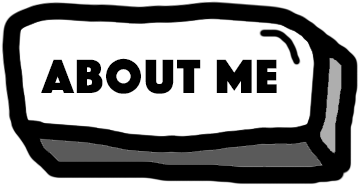
<style>
.page{position:relative;width:360px;height:186px;background:#ffffff}
.page>*{position:absolute;margin:0}
.t1{font:50px "Phosphate-Solid";letter-spacing:0.04em;color:#000000}
</style>
<div class="page">
<p class="t1" style="left:41px;top:58px;width:236px;height:36px">about me</p>
</div>
